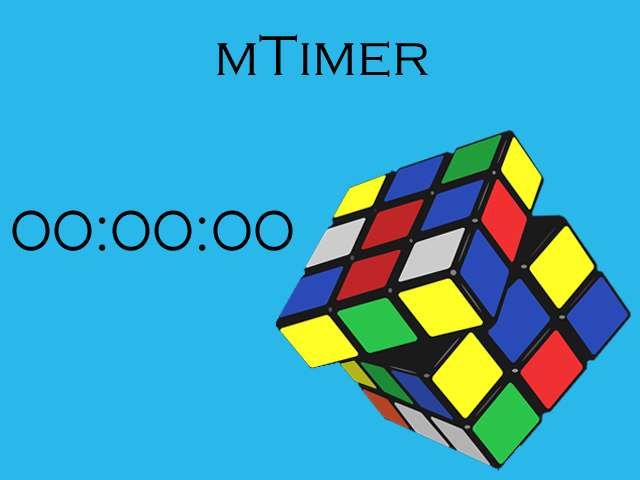
<style>
.page{position:relative;width:640px;height:480px;background:#2ab7ea}
.page>*{position:absolute;margin:0}
.t1{font:58.3px "CopperplateGothic-Light";color:#000000}
</style>
<div class="page">
<p class="t1" style="left:217px;top:34px;width:211px;height:43px">mTimer</p>
<p class="t1" style="left:12px;top:210px;width:281px;height:41px">00:00:00</p>
</div>
